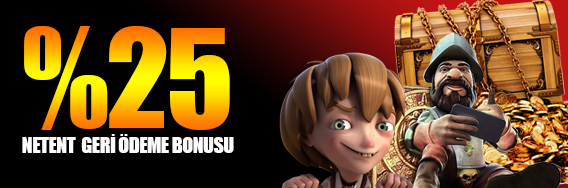
<style>
.page{position:relative;width:568px;height:188px;background:#000000}
.page>*{position:absolute;margin:0}
.t1{font:126px "Impact";letter-spacing:-0.025em;text-transform:uppercase}
.t2{font:20px "Impact";letter-spacing:-0.025em;color:#fefdfc;text-transform:uppercase}
</style>
<div class="page">
<p class="t1" style="left:24px;top:26px;width:206px;height:104px">%25</p>
<p class="t2" style="left:22px;top:134px;width:212px;height:19px">netent  gerİ ÖDEME BONUSU</p>
</div>
